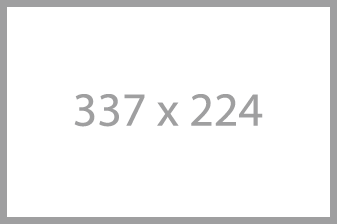
<style>
.page{position:relative;width:337px;height:224px;background:#ffffff}
.page>*{position:absolute;margin:0}
.t1{font:48px "MyriadPro-Regular";color:#9f9fa0}
</style>
<div class="page">
<p class="t1" style="left:74px;top:94px;width:189px;height:33px">337 x 224</p>
</div>
